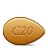
<style>
.page{position:relative;width:48px;height:48px;background:#ffffff}
.page>*{position:absolute;margin:0}
.t1{font:12.4px "TimesNewRomanPS-ItalicMT";letter-spacing:0.02em}
</style>
<div class="page">
<p class="t1" style="left:12px;top:27px;width:21px;height:10px">C20</p>
<p class="t1" style="left:12px;top:26px;width:21px;height:10px">C20</p>
<p class="t1" style="left:12px;top:26px;width:21px;height:10px">C20</p>
</div>
